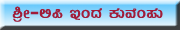
<style>
.page{position:relative;width:180px;height:30px}
.page>*{position:absolute;margin:0}
.t1{font:20px "Kuvempu_Eng_0005";color:#a11d39}
</style>
<div class="page">
<p class="t1" style="left:12px;top:6px;width:151px;height:16px">²æÃ-°¦ EAzÀ PÀÄªÉA¥ÀÄ</p>
</div>
